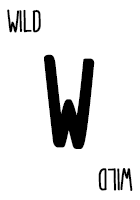
<style>
.page{position:relative;width:140px;height:200px;background:#ffffff}
.page>*{position:absolute;margin:0}
.t1{font:28.7px "CardenioModern-Reg";letter-spacing:-0.05em;color:#000000;text-transform:uppercase;font-weight:bold;scale:0.87 1}
.t2{font:115px "CardenioModern-Bold";letter-spacing:-0.1em;color:#000000;text-transform:uppercase;font-weight:bold;scale:0.87 1}
</style>
<div class="page">
<p class="t1" style="left:7px;top:9px;width:34px;height:24px">wild</p>
<p class="t2" style="left:44px;top:54px;width:51px;height:95px">W</p>
<p class="t1" style="left:98px;top:168px;width:35px;height:23px;rotate:180deg">wild</p>
</div>
